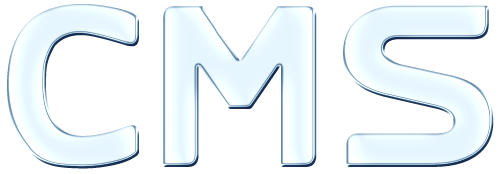
<style>
.page{position:relative;width:500px;height:174px;background:#ffffff}
.page>*{position:absolute;margin:0}
.t1{font:208.8px "SKYfontThick";letter-spacing:0.1em;color:#e9f8ff}
</style>
<div class="page">
<p class="t1" style="left:7px;top:4px;width:487px;height:165px">CMS</p>
</div>
